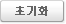
<style>
.page{position:relative;width:66px;height:24px}
.page>*{position:absolute;margin:0}
.t1{font:12px "morris9";color:#646464;font-weight:bold}
</style>
<div class="page">
<p class="t1" style="left:15px;top:6px;width:33px;height:10px">초기화</p>
</div>
